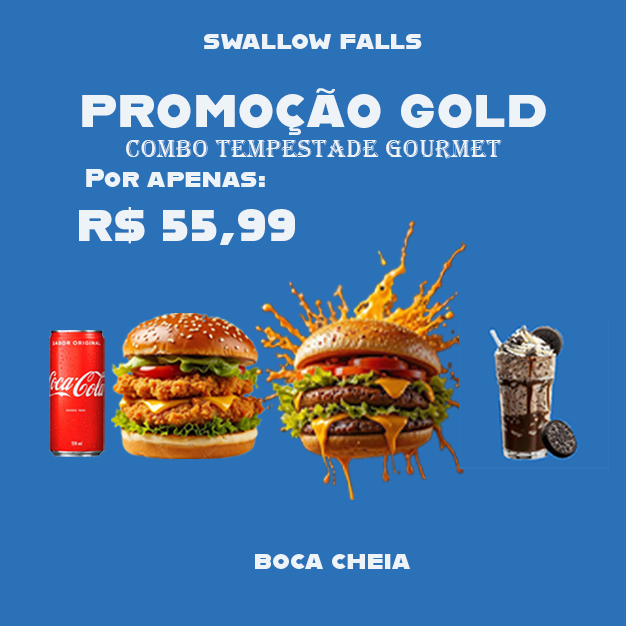
<style>
.page{position:relative;width:626px;height:626px;background:#2a71b8}
.page>*{position:absolute;margin:0}
.t1{font:25px "Alfarn";letter-spacing:0.025em;color:#eef3f8}
.t2{font:25px "Algerian";letter-spacing:0.025em;color:#eef3f8}
.t3{font:32.6px "Alfarn";letter-spacing:0.025em;color:#eef3f8}
.t4{font:52.6px "Alfarn";letter-spacing:0.025em;color:#eef3f8}
.t5{font:45px "Alfarn";letter-spacing:0.025em;color:#eef3f8}
</style>
<div class="page">
<p class="t1" style="left:204px;top:34px;width:218px;height:15px">swallow falls</p>
<p class="t2" style="left:79px;top:88px;width:467px;height:157px;text-align:center"><span class="t3"><br></span><span class="t4">promoção gold<br></span>combo tempestade gourmet<br>  <span class="t1">   Por apenas: <br></span><span class="t5">    R$ 55,99</span></p>
<p class="t1" style="left:255px;top:554px;width:155px;height:15px">boca cheia</p>
</div>
